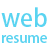
<style>
.page{position:relative;width:48px;height:48px;background:#ffffff}
.page>*{position:absolute;margin:0}
.t1{font:24px "AdobeHeitiStd-Regular";color:#59d4f1}
.t2{font:14px "AdobeHeitiStd-Regular";letter-spacing:-0.01em;color:#59d4f1}
</style>
<div class="page">
<p class="t1" style="left:1px;top:7px;width:46px;height:20px">web</p>
<p class="t2" style="left:2px;top:35px;width:45px;height:8px">resume</p>
</div>
